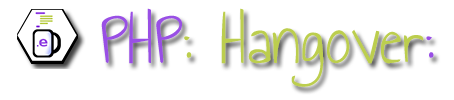
<style>
.page{position:relative;width:454px;height:100px;background:#ffffff}
.page>*{position:absolute;margin:0}
.t1{font:72px "AnnieUseYourTelescope-Regular";color:#bcce4e}
.t2{font:72px "AnnieUseYourTelescope-Regular";color:#994fe5}
</style>
<div class="page">
<p class="t1" style="left:101px;top:8px;width:333px;height:79px"><span class="t2">PHP</span>: Hangover<span class="t2">:</span></p>
</div>
